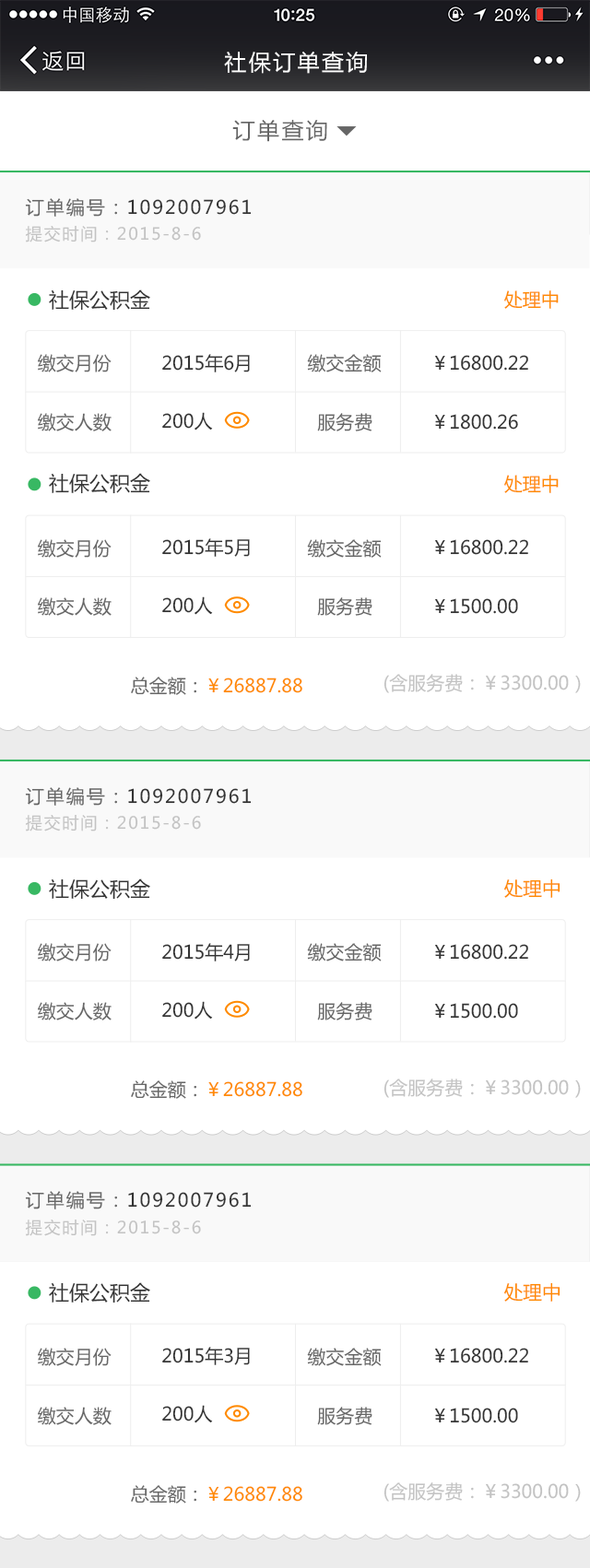
<style>
.page{position:relative;width:590px;height:1568px;background:#ffffff}
.page>*{position:absolute;margin:0}
.t1{font:22.1px "MicrosoftYaHei";letter-spacing:0.1em;color:#ffffff}
.t2{font:22.1px "MicrosoftYaHei";letter-spacing:0.1em;color:#666666}
.t3{font:18.4px "MicrosoftYaHei";letter-spacing:0.1em;color:#333333}
.t4{font:18.4px "MicrosoftYaHei";letter-spacing:0.1em;color:#666666}
.t5{font:16.6px "MicrosoftYaHei";letter-spacing:0.1em;color:#c3c3c3}
.t6{font:20.3px "MicrosoftYaHei";color:#333333}
.t7{font:18.4px "MicrosoftYaHei";color:#ff8a00}
.t8{font:18.4px "MicrosoftYaHei";color:#666666}
.t9{font:18.4px "MicrosoftYaHei";color:#333333}
.t10{font:18.4px "MicrosoftYaHei";color:#c3c3c3}
.t11{font:19px "MicrosoftYaHei";color:#ff8a00}
</style>
<div class="page">
<p class="t1" style="left:224px;top:52px;width:143px;height:22px">社保订单查询</p>
<p class="t2" style="left:232px;top:120px;width:95px;height:22px">订单查询</p>
<p class="t3" style="left:25px;top:198px;width:227px;height:19px"><span class="t4">订单编号：</span>1092007961</p>
<p class="t5" style="left:26px;top:226px;width:175px;height:16px">提交时间：2015-8-6</p>
<p class="t6" style="left:49px;top:289px;width:101px;height:22px">社保公积金</p>
<p class="t7" style="left:504px;top:290px;width:55px;height:19px">处理中</p>
<p class="t8" style="left:38px;top:354px;width:74px;height:18px">缴交月份</p>
<p class="t9" style="left:162px;top:354px;width:88px;height:18px">2015年6月</p>
<p class="t8" style="left:307px;top:354px;width:75px;height:18px">缴交金额</p>
<p class="t9" style="left:435px;top:355px;width:93px;height:16px">￥16800.22</p>
<p class="t8" style="left:38px;top:413px;width:74px;height:18px">缴交人数</p>
<p class="t9" style="left:162px;top:412px;width:51px;height:18px">200人</p>
<p class="t8" style="left:317px;top:413px;width:55px;height:18px">服务费</p>
<p class="t9" style="left:435px;top:414px;width:83px;height:16px">￥1800.26</p>
<p class="t6" style="left:49px;top:473px;width:101px;height:21px">社保公积金</p>
<p class="t7" style="left:504px;top:475px;width:55px;height:18px">处理中</p>
<p class="t8" style="left:38px;top:539px;width:74px;height:19px">缴交月份</p>
<p class="t9" style="left:162px;top:538px;width:88px;height:19px">2015年5月</p>
<p class="t8" style="left:307px;top:539px;width:75px;height:19px">缴交金额</p>
<p class="t9" style="left:435px;top:539px;width:93px;height:16px">￥16800.22</p>
<p class="t8" style="left:38px;top:597px;width:74px;height:19px">缴交人数</p>
<p class="t9" style="left:162px;top:596px;width:51px;height:19px">200人</p>
<p class="t8" style="left:317px;top:597px;width:55px;height:19px">服务费</p>
<p class="t9" style="left:435px;top:598px;width:83px;height:16px">￥1500.00</p>
<p class="t7" style="left:131px;top:677px;width:171px;height:18px"><span class="t8">总金额：</span>￥26887.88</p>
<p class="t10" style="left:383px;top:674px;width:198px;height:19px">(含服务费：￥3300.00）</p>
<p class="t3" style="left:25px;top:787px;width:227px;height:19px"><span class="t4">订单编号：</span>1092007961</p>
<p class="t5" style="left:26px;top:815px;width:175px;height:16px">提交时间：2015-8-6</p>
<p class="t6" style="left:49px;top:878px;width:101px;height:22px">社保公积金</p>
<p class="t11" style="left:504px;top:878px;width:56px;height:20px">处理中</p>
<p class="t8" style="left:38px;top:943px;width:74px;height:18px">缴交月份</p>
<p class="t9" style="left:162px;top:943px;width:88px;height:18px">2015年4月</p>
<p class="t8" style="left:307px;top:943px;width:75px;height:18px">缴交金额</p>
<p class="t9" style="left:435px;top:944px;width:93px;height:16px">￥16800.22</p>
<p class="t9" style="left:162px;top:1001px;width:51px;height:19px">200人</p>
<p class="t8" style="left:38px;top:1002px;width:74px;height:18px">缴交人数</p>
<p class="t8" style="left:317px;top:1002px;width:55px;height:18px">服务费</p>
<p class="t9" style="left:435px;top:1003px;width:83px;height:16px">￥1500.00</p>
<p class="t7" style="left:131px;top:1080px;width:171px;height:19px"><span class="t8">总金额：</span>￥26887.88</p>
<p class="t10" style="left:383px;top:1079px;width:198px;height:19px">(含服务费：￥3300.00）</p>
<p class="t3" style="left:25px;top:1191px;width:227px;height:18px"><span class="t4">订单编号：</span>1092007961</p>
<p class="t5" style="left:26px;top:1220px;width:175px;height:16px">提交时间：2015-8-6</p>
<p class="t6" style="left:49px;top:1282px;width:101px;height:21px">社保公积金</p>
<p class="t11" style="left:504px;top:1282px;width:56px;height:20px">处理中</p>
<p class="t8" style="left:38px;top:1348px;width:74px;height:18px">缴交月份</p>
<p class="t9" style="left:162px;top:1347px;width:88px;height:18px">2015年3月</p>
<p class="t8" style="left:307px;top:1348px;width:75px;height:18px">缴交金额</p>
<p class="t9" style="left:435px;top:1348px;width:93px;height:15px">￥16800.22</p>
<p class="t8" style="left:38px;top:1407px;width:74px;height:18px">缴交人数</p>
<p class="t9" style="left:162px;top:1405px;width:51px;height:18px">200人</p>
<p class="t8" style="left:317px;top:1407px;width:55px;height:18px">服务费</p>
<p class="t9" style="left:435px;top:1408px;width:83px;height:15px">￥1500.00</p>
<p class="t7" style="left:131px;top:1485px;width:171px;height:18px"><span class="t8">总金额：</span>￥26887.88</p>
<p class="t10" style="left:383px;top:1482px;width:198px;height:20px">(含服务费：￥3300.00）</p>
</div>
